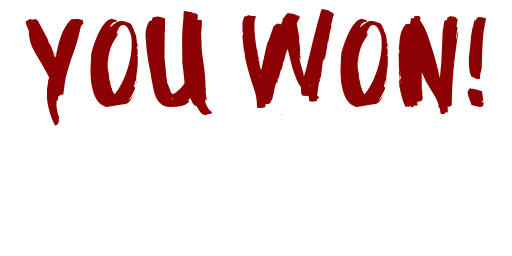
<style>
.page{position:relative;width:512px;height:256px;background:#ffffff}
.page>*{position:absolute;margin:0}
.t1{font:117px "CFMidnight-Regular";color:#8c0101}
</style>
<div class="page">
<p class="t1" style="left:25px;top:9px;width:461px;height:117px">YOU WON!</p>
</div>
